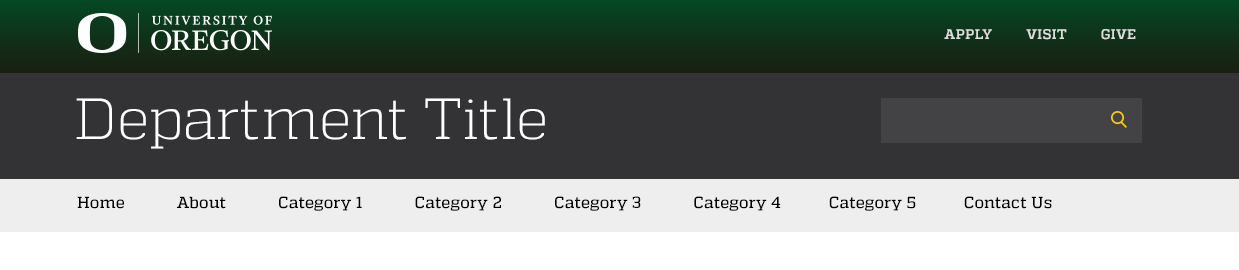
<style>
.page{position:relative;width:1239px;height:270px;background:#333336}
.page>*{position:absolute;margin:0}
.t1{font:14px "Quadon-Bold";letter-spacing:0.025em;color:#dddddd}
.t2{font:58px "Quadon-Light";color:#ffffff}
.t3{font:16px "Quadon-Medium";letter-spacing:0.025em;color:#000000}
</style>
<div class="page">
<p class="t1" style="left:944px;top:29px;width:192px;height:11px">APPLY         VISIT         GIVE</p>
<p class="t2" style="left:76px;top:98px;width:469px;height:51px">Department Title</p>
<p class="t3" style="left:77px;top:196px;width:975px;height:15px">Home            About            Category 1            Category 2            Category 3            Category 4           Category 5           Contact Us</p>
</div>
